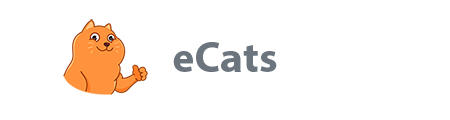
<style>
.page{position:relative;width:450px;height:120px;background:#ffffff}
.page>*{position:absolute;margin:0}
.t1{font:43.2px "MyriadPro-Bold";color:#6c757d}
</style>
<div class="page">
<p class="t1" style="left:173px;top:42px;width:104px;height:30px">eCats</p>
</div>
